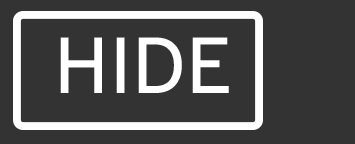
<style>
.page{position:relative;width:355px;height:144px;background:#333333}
.page>*{position:absolute;margin:0}
.t1{font:75px "BentonGothicTab-Medium";color:#ffffff}
</style>
<div class="page">
<p class="t1" style="left:60px;top:37px;width:169px;height:56px">HIDE</p>
</div>
